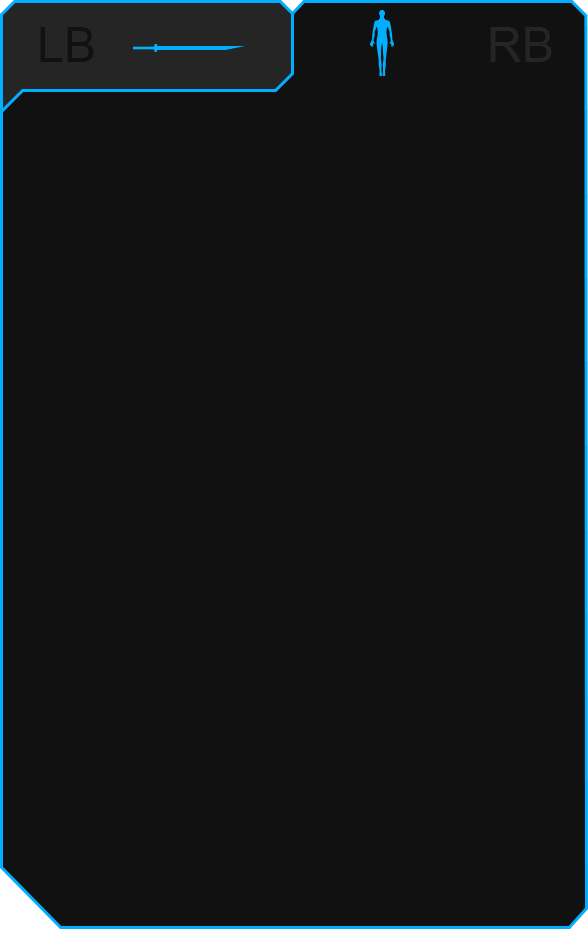
<style>
.page{position:relative;width:588px;height:929px;background:#111111}
.page>*{position:absolute;margin:0}
.t1{font:48px "ArialMT";color:#111111}
.t2{font:48px "ArialMT";color:#252525}
</style>
<div class="page">
<p class="t1" style="left:40px;top:27px;width:54px;height:35px">LB</p>
<p class="t2" style="left:490px;top:27px;width:62px;height:35px">RB</p>
</div>
